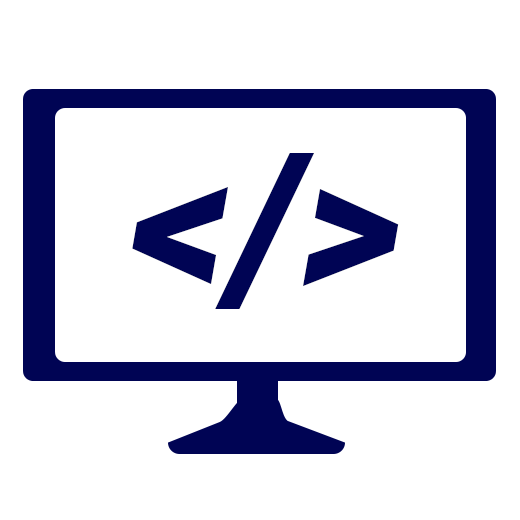
<style>
.page{position:relative;width:520px;height:520px;background:#ffffff}
.page>*{position:absolute;margin:0}
.t1{font:202.3px "Roboto-BlackItalic";color:#000454}
</style>
<div class="page">
<p class="t1" style="left:132px;top:153px;width:267px;height:156px">&lt;/&gt;</p>
</div>
